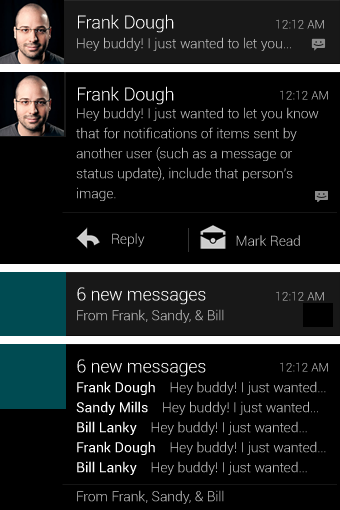
<style>
.page{position:relative;width:340px;height:510px;background:#000000}
.page>*{position:absolute;margin:0}
.t1{font:18px "Roboto-Light";letter-spacing:-0.005em;color:#ffffff}
.t2{font:12px "Roboto-Light"}
.t3{font:14px "Roboto-Light";color:#c0c0c0}
.t4{font:14px/20px "Roboto-Light";color:#c0c0c0}
.t5{font:14px/20px "Roboto-Regular";color:#ffffff}
</style>
<div class="page">
<p class="t1" style="left:78px;top:14px;width:96px;height:19px">Frank Dough</p>
<p class="t2" style="left:276px;top:19px;width:48px;height:10px">12:12 AM</p>
<p class="t3" style="left:77px;top:37px;width:214px;height:14px">Hey buddy! I just wanted to let you…</p>
<p class="t1" style="left:78px;top:86px;width:96px;height:19px">Frank Dough</p>
<p class="t2" style="left:280px;top:90px;width:48px;height:10px">12:12 AM</p>
<p class="t4" style="left:76px;top:107px;width:243px;height:94px">Hey buddy! I just wanted to let you know that for notifications of items sent by another user (such as a message or status update), include that person's image.</p>
<p class="t3" style="left:112px;top:233px;width:33px;height:14px">Reply</p>
<p class="t3" style="left:236px;top:235px;width:64px;height:11px">Mark Read</p>
<p class="t1" style="left:77px;top:287px;width:129px;height:18px">6 new messages</p>
<p class="t2" style="left:276px;top:291px;width:48px;height:10px">12:12 AM</p>
<p class="t3" style="left:77px;top:309px;width:147px;height:14px">From Frank, Sandy, &amp; Bill</p>
<p class="t1" style="left:77px;top:359px;width:129px;height:18px">6 new messages</p>
<p class="t2" style="left:280px;top:362px;width:48px;height:10px">12:12 AM</p>
<p class="t4" style="left:76px;top:381px;width:250px;height:94px"><span class="t5">Frank Dough    </span>Hey buddy! I just wanted… <span class="t5">Sandy Mills    </span>Hey buddy! I just wanted… <span class="t5">Bill Lanky    </span>Hey buddy! I just wanted…<br><span class="t5">Frank Dough    </span>Hey buddy! I just wanted… <span class="t5">Bill Lanky    </span>Hey buddy! I just wanted…</p>
<p class="t3" style="left:77px;top:490px;width:147px;height:14px">From Frank, Sandy, &amp; Bill</p>
</div>
